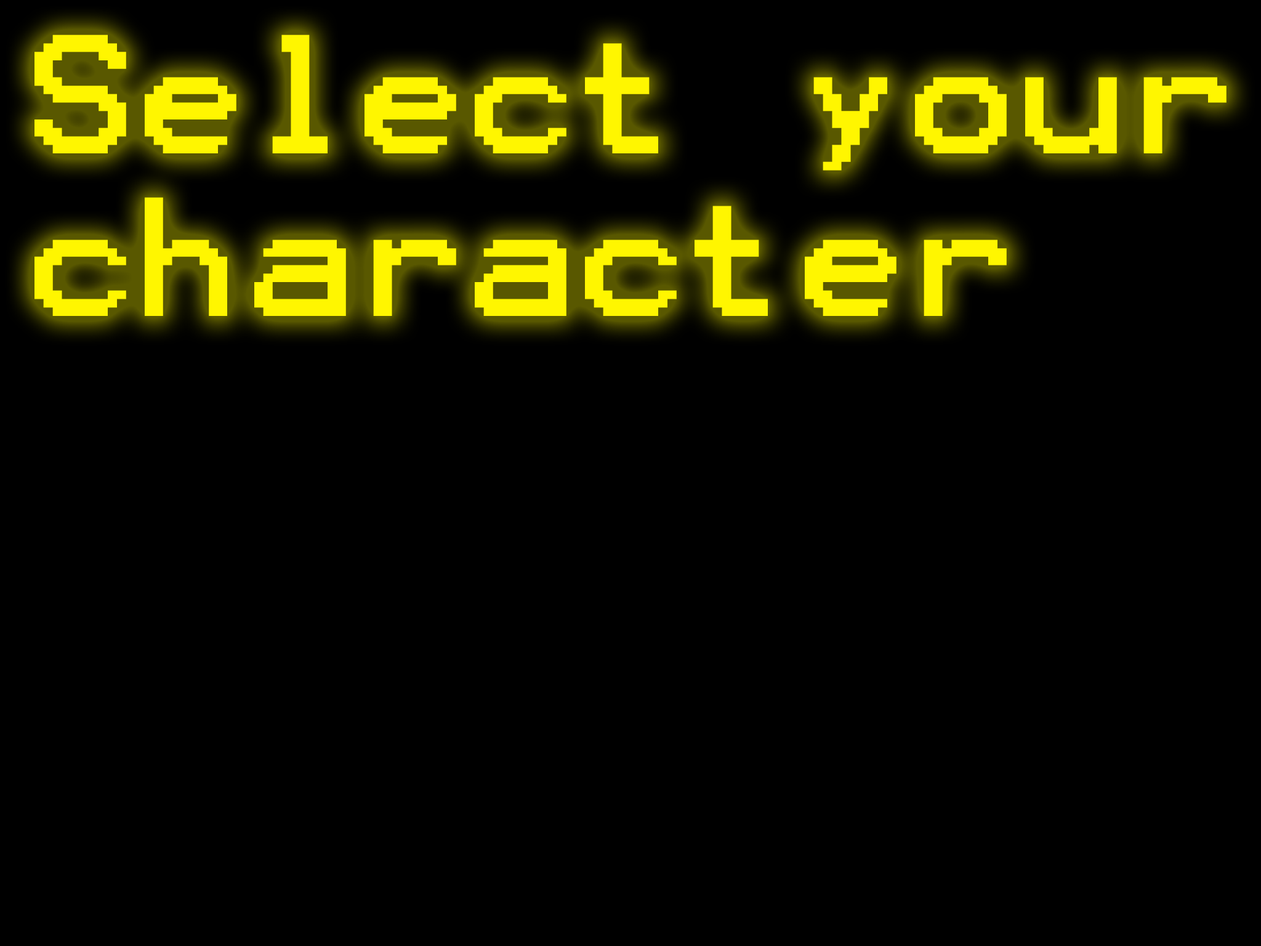
<style>
.page{position:relative;width:1261px;height:946px;background:#000000}
.page>*{position:absolute;margin:0}
.t1{font:135.3px "Terminal";color:#fff600;scale:1.08 1}
</style>
<div class="page">
<p class="t1" style="left:34px;top:34px;width:1192px;height:282px">Select your<br>character</p>
</div>
